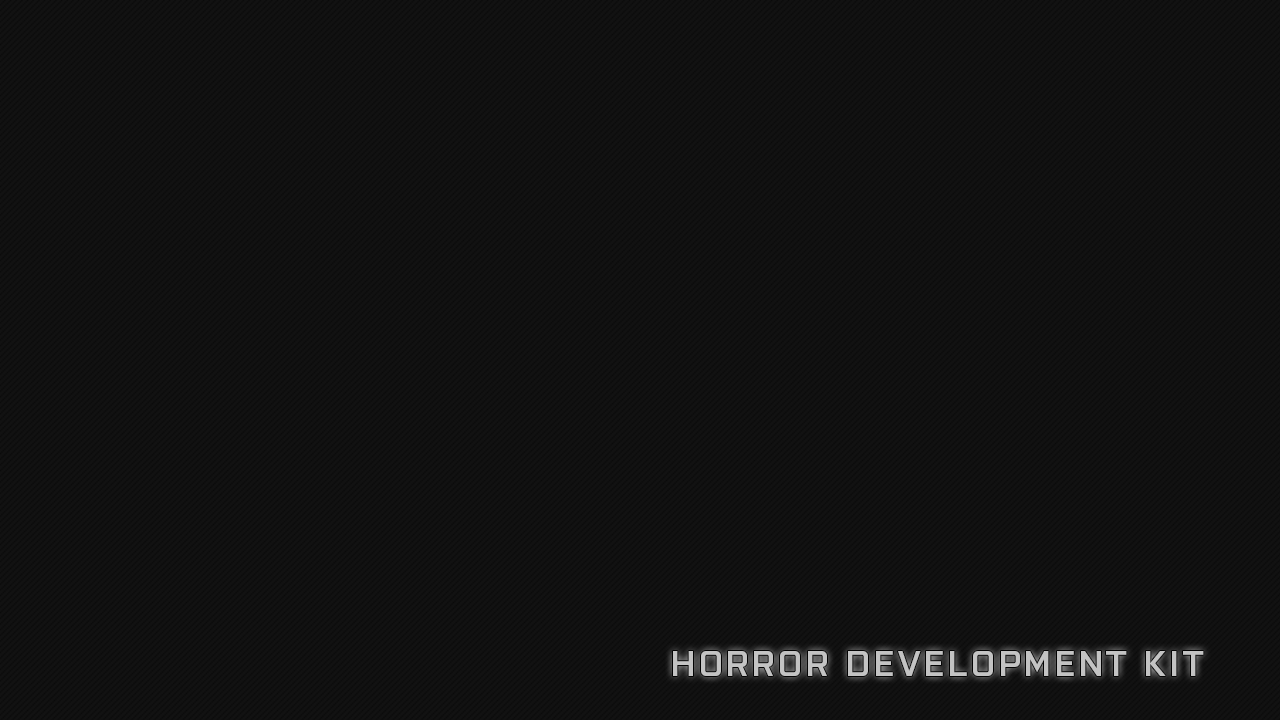
<style>
.page{position:relative;width:1280px;height:720px;background:#121212}
.page>*{position:absolute;margin:0}
.t1{font:35.8px "Purista-SemiBold";letter-spacing:0.1em;color:#c3c3c3}
</style>
<div class="page">
<p class="t1" style="left:673px;top:651px;width:531px;height:25px">HORROR DEVELOPMENT KIT</p>
</div>
